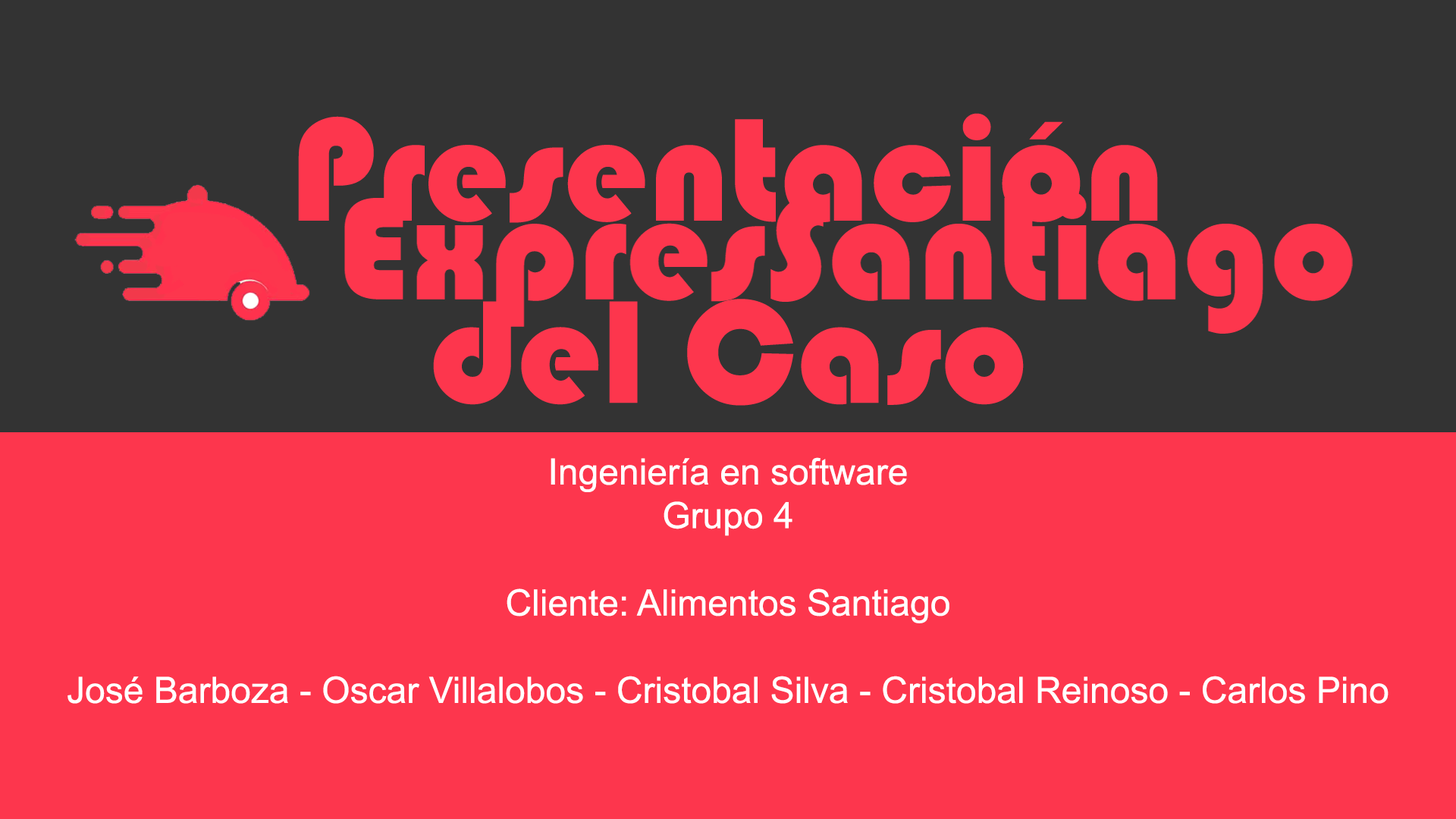
<style>
.page{position:relative;width:1456px;height:819px;background:#fd364d}
.page>*{position:absolute;margin:0}
.t1{font:151.9px "Bauhaus93";color:#fd364d}
.t2{font:36.4px "ArialMT";color:#ffffff}
</style>
<div class="page">
<p class="t1" style="left:298px;top:113px;width:860px;height:293px;text-align:center">Presentación<br>del Caso</p>
<p class="t2" style="left:67px;top:457px;width:1321px;height:247px;text-align:center">Ingeniería en software<br>Grupo 4<br><br>Cliente: Alimentos Santiago<br><br>José Barboza - Oscar Villalobos - Cristobal Silva - Cristobal Reinoso - Carlos Pino</p>
</div>
